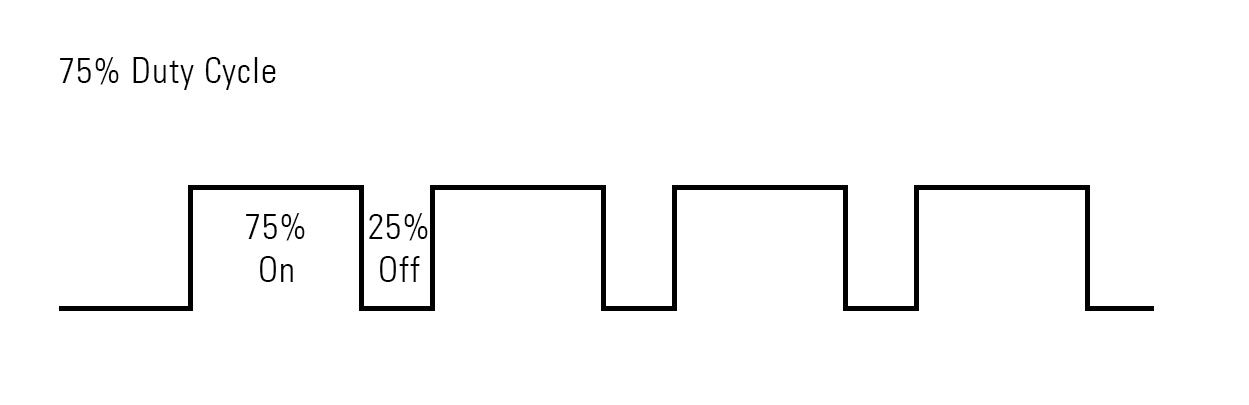
<style>
.page{position:relative;width:1249px;height:405px;background:#ffffff}
.page>*{position:absolute;margin:0}
.t1{font:36px "UniversLT-CondensedLight";letter-spacing:0.025em;color:#000000}
</style>
<div class="page">
<p class="t1" style="left:60px;top:57px;width:216px;height:33px">75% Duty Cycle</p>
<p class="t1" style="left:246px;top:213px;width:59px;height:69px;text-align:center">75%<br>On</p>
<p class="t1" style="left:369px;top:213px;width:59px;height:69px;text-align:center">25%<br>Off</p>
</div>
